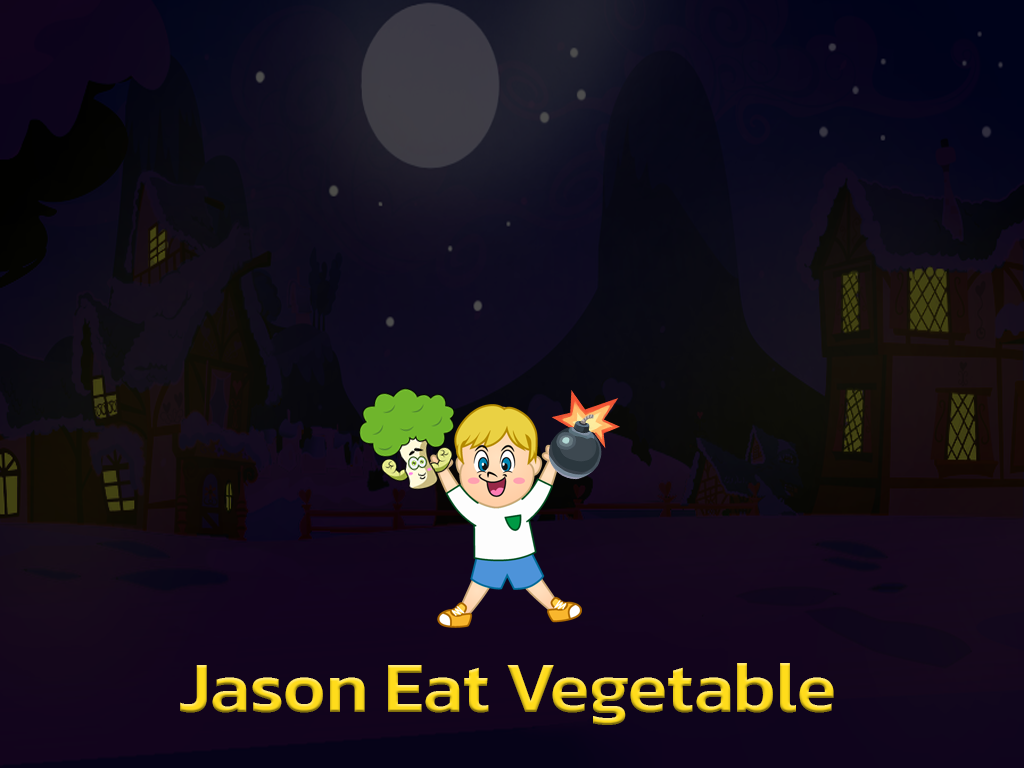
<style>
.page{position:relative;width:1024px;height:768px}
.page>*{position:absolute;margin:0}
.t1{font:72px "Kanit-Medium"}
</style>
<div class="page">
<p class="t1" style="left:180px;top:663px;width:654px;height:62px">Jason Eat Vegetable</p>
</div>
